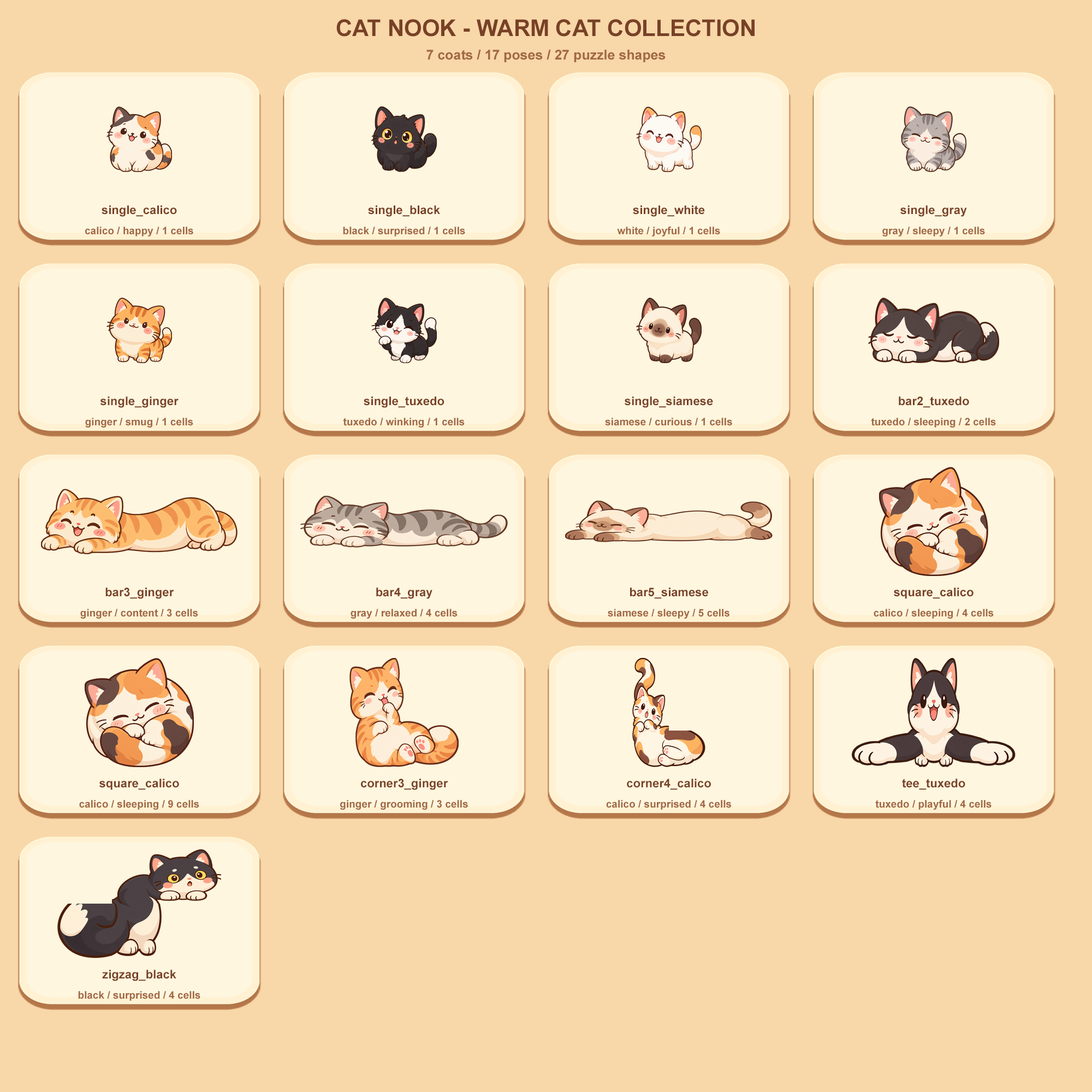
<style>
.page{position:relative;width:1092px;height:1092px;background:#f8d7a8}
.page>*{position:absolute;margin:0}
.t1{font:22.9px "Arial-BoldMT";color:#784126}
.t2{font:13.6px "Arial-BoldMT";color:#a16843}
.t3{font:12px "Arial-BoldMT";color:#784126}
.t4{font:10.4px "Arial-BoldMT";color:#a16843}
</style>
<div class="page">
<p class="t1" style="left:336px;top:19px;width:419px;height:18px">CAT NOOK - WARM CAT COLLECTION</p>
<p class="t2" style="left:426px;top:50px;width:240px;height:12px">7 coats / 17 poses / 27 puzzle shapes</p>
<p class="t3" style="left:102px;top:205px;width:75px;height:12px">single_calico</p>
<p class="t3" style="left:368px;top:205px;width:72px;height:12px">single_black</p>
<p class="t3" style="left:633px;top:205px;width:72px;height:12px">single_white</p>
<p class="t3" style="left:900px;top:205px;width:67px;height:12px">single_gray</p>
<p class="t4" style="left:85px;top:227px;width:108px;height:9px">calico / happy / 1 cells</p>
<p class="t4" style="left:343px;top:227px;width:122px;height:9px">black / surprised / 1 cells</p>
<p class="t4" style="left:617px;top:227px;width:103px;height:9px">white / joyful / 1 cells</p>
<p class="t4" style="left:882px;top:227px;width:103px;height:9px">gray / sleepy / 1 cells</p>
<p class="t3" style="left:100px;top:396px;width:79px;height:12px">single_ginger</p>
<p class="t3" style="left:364px;top:396px;width:80px;height:12px">single_tuxedo</p>
<p class="t3" style="left:625px;top:396px;width:88px;height:12px">single_siamese</p>
<p class="t3" style="left:899px;top:396px;width:70px;height:12px">bar2_tuxedo</p>
<p class="t4" style="left:85px;top:418px;width:108px;height:10px">ginger / smug / 1 cells</p>
<p class="t4" style="left:343px;top:418px;width:122px;height:10px">tuxedo / winking / 1 cells</p>
<p class="t4" style="left:605px;top:418px;width:127px;height:8px">siamese / curious / 1 cells</p>
<p class="t4" style="left:871px;top:418px;width:125px;height:10px">tuxedo / sleeping / 2 cells</p>
<p class="t3" style="left:105px;top:587px;width:69px;height:12px">bar3_ginger</p>
<p class="t3" style="left:376px;top:587px;width:56px;height:12px">bar4_gray</p>
<p class="t3" style="left:630px;top:587px;width:78px;height:12px">bar5_siamese</p>
<p class="t3" style="left:894px;top:587px;width:80px;height:12px">square_calico</p>
<p class="t4" style="left:80px;top:609px;width:118px;height:10px">ginger / content / 3 cells</p>
<p class="t4" style="left:351px;top:609px;width:107px;height:10px">gray / relaxed / 4 cells</p>
<p class="t4" style="left:608px;top:609px;width:121px;height:10px">siamese / sleepy / 5 cells</p>
<p class="t4" style="left:874px;top:609px;width:120px;height:10px">calico / sleeping / 4 cells</p>
<p class="t3" style="left:99px;top:779px;width:80px;height:11px">square_calico</p>
<p class="t3" style="left:361px;top:779px;width:87px;height:11px">corner3_ginger</p>
<p class="t3" style="left:627px;top:779px;width:84px;height:11px">corner4_calico</p>
<p class="t3" style="left:902px;top:779px;width:63px;height:11px">tee_tuxedo</p>
<p class="t4" style="left:79px;top:800px;width:120px;height:10px">calico / sleeping / 9 cells</p>
<p class="t4" style="left:340px;top:800px;width:128px;height:10px">ginger / grooming / 3 cells</p>
<p class="t4" style="left:606px;top:800px;width:125px;height:10px">calico / surprised / 4 cells</p>
<p class="t4" style="left:875px;top:800px;width:117px;height:10px">tuxedo / playful / 4 cells</p>
<p class="t3" style="left:102px;top:970px;width:74px;height:11px">zigzag_black</p>
<p class="t4" style="left:78px;top:991px;width:122px;height:10px">black / surprised / 4 cells</p>
</div>
